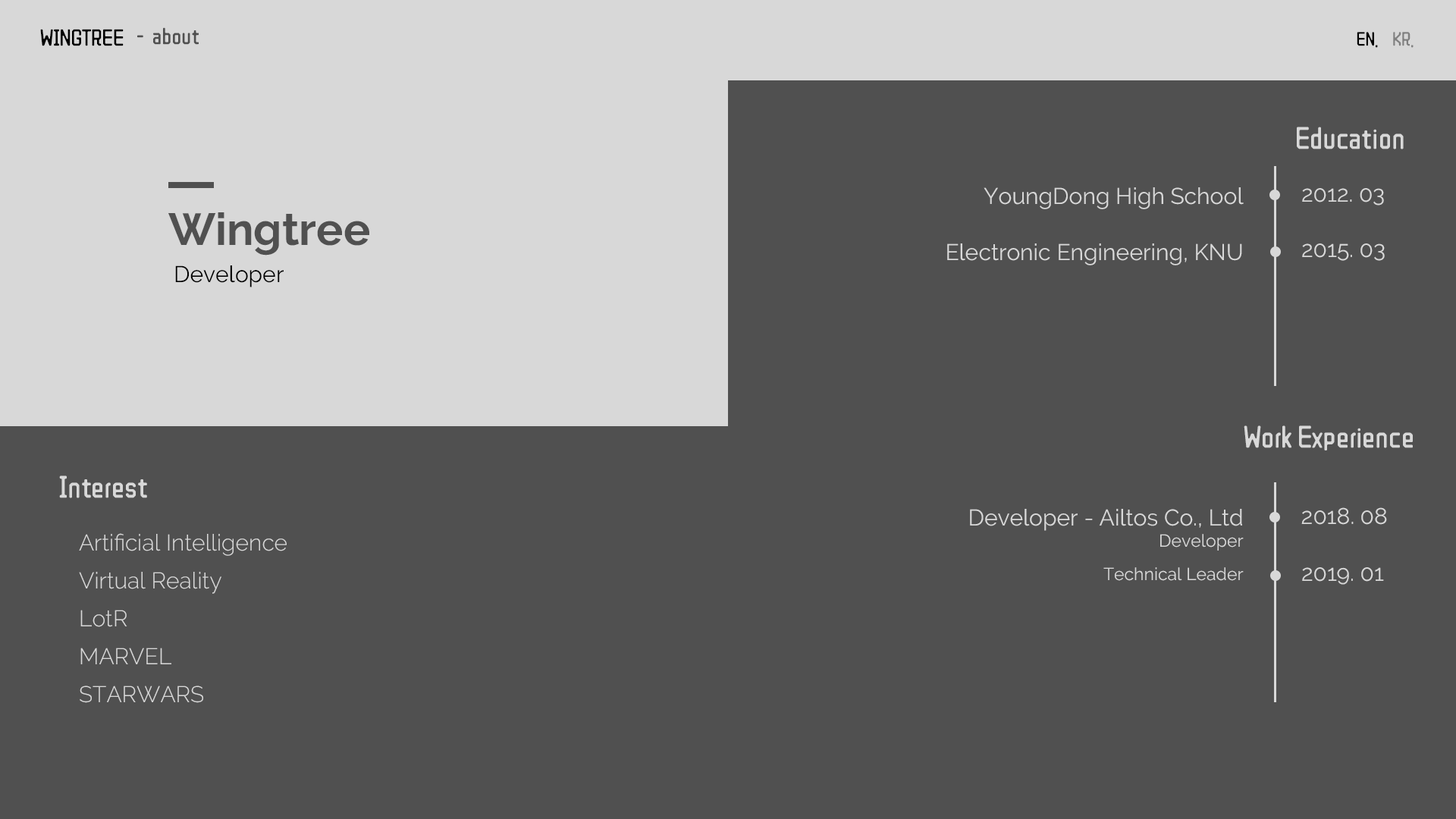
<style>
.page{position:relative;width:1456px;height:819px;background:#505050}
.page>*{position:absolute;margin:0}
.t1{font:22.7px "ZCOOLQingKeHuangYou-Regular";color:#000000}
.t2{font:22.7px "ZCOOLQingKeHuangYou-Regular";color:#505050}
.t3{font:19px "ZCOOLQingKeHuangYou-Regular";color:#000000}
.t4{font:19px "ZCOOLQingKeHuangYou-Regular";color:#808080}
.t5{font:30.3px "ZCOOLQingKeHuangYou-Regular";color:#d8d8d8}
.t6{font:22.7px "Raleway-Regular";color:#d8d8d8}
.t7{font:44.7px "Raleway-Bold";color:#505050}
.t8{font:22.7px "Raleway-Regular";color:#000000}
.t9{font:22.7px/37.9px "Raleway-Light";color:#d8d8d8}
.t10{font:17.4px "Raleway-Regular";color:#d8d8d8}
</style>
<div class="page">
<p class="t1" style="left:40px;top:29px;width:84px;height:17px">WINGTREE</p>
<p class="t2" style="left:137px;top:27px;width:62px;height:18px">-  about</p>
<p class="t3" style="left:1357px;top:32px;width:57px;height:16px">EN.    <span class="t4">KR.</span></p>
<p class="t5" style="left:1297px;top:127px;width:107px;height:22px">Education</p>
<p class="t6" style="left:984px;top:187px;width:260px;height:22px">YoungDong High School</p>
<p class="t6" style="left:1302px;top:188px;width:82px;height:18px">2012. 03</p>
<p class="t7" style="left:168px;top:212px;width:201px;height:44px">Wingtree</p>
<p class="t6" style="left:947px;top:243px;width:295px;height:22px">Electronic Engineering, KNU</p>
<p class="t6" style="left:1302px;top:243px;width:83px;height:18px">2015. 03</p>
<p class="t8" style="left:175px;top:265px;width:109px;height:22px">Developer</p>
<p class="t5" style="left:1244px;top:425px;width:169px;height:25px">Work Experience</p>
<p class="t5" style="left:59px;top:475px;width:88px;height:23px">Interest</p>
<p class="t6" style="left:970px;top:509px;width:272px;height:22px">Developer - Ailtos Co., Ltd</p>
<p class="t6" style="left:1301px;top:507px;width:86px;height:18px">2018. 08</p>
<p class="t9" style="left:79px;top:533px;width:208px;height:170px">Artificial Intelligence<br>Virtual Reality<br>LotR<br>MARVEL<br>STARWARS</p>
<p class="t10" style="left:1160px;top:534px;width:84px;height:17px">Developer</p>
<p class="t10" style="left:1103px;top:567px;width:141px;height:14px">Technical Leader</p>
<p class="t6" style="left:1302px;top:567px;width:82px;height:18px">2019. 01</p>
</div>
